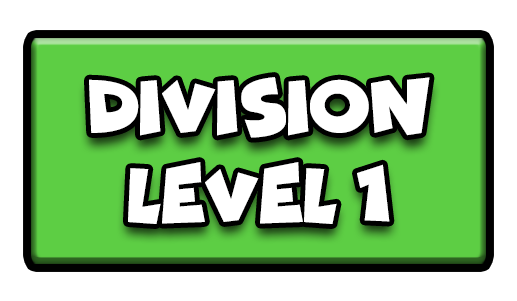
<style>
.page{position:relative;width:517px;height:301px;background:#ffffff}
.page>*{position:absolute;margin:0}
.t1{font:77.7px "Funhouse";color:#ffffff;scale:0.95 1}
</style>
<div class="page">
<p class="t1" style="left:89px;top:77px;width:341px;height:61px">DIVISION</p>
<p class="t1" style="left:128px;top:162px;width:262px;height:62px">LEVEL 1</p>
</div>
